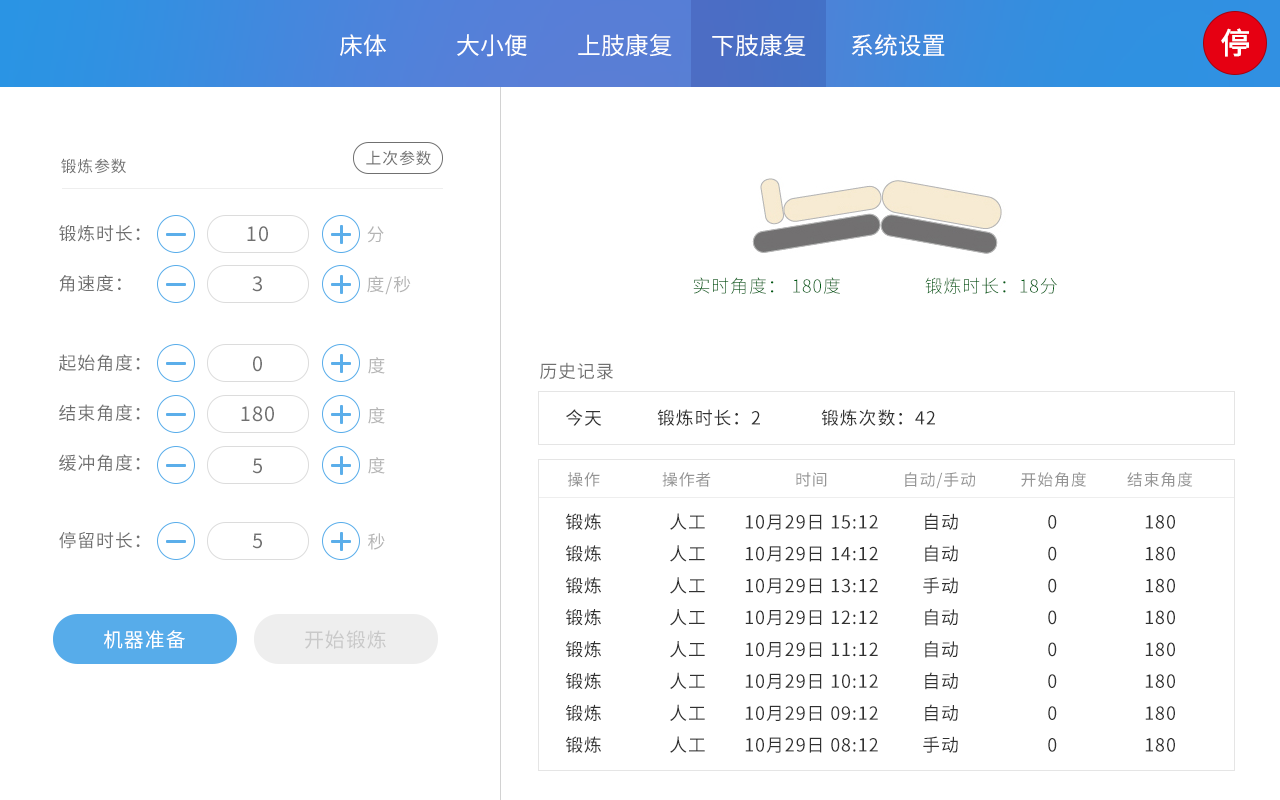
<style>
.page{position:relative;width:1280px;height:800px;background:#ffffff}
.page>*{position:absolute;margin:0}
.t1{font:29.9px "SourceHanSansCN-Medium";color:#ffffff}
.t2{font:23.9px "SourceHanSansCN-Regular";color:#ffffff}
.t3{font:15.9px "SourceHanSansCN-Regular";letter-spacing:0.05em;color:#707070}
.t4{font:17.9px/50px "SourceHanSansCN-Regular";letter-spacing:0.05em;color:#707070}
.t5{font:19.9px/50px "SourceHanSansCN-Regular";letter-spacing:0.05em;color:#707070}
.t6{font:17.9px/50px "SourceHanSansCN-Regular";letter-spacing:0.05em;color:#b5b5b5}
.t7{font:17.9px "SourceHanSansCN-Light";letter-spacing:0.05em;color:#005e15}
.t8{font:17.9px "SourceHanSansCN-Regular";letter-spacing:0.05em;color:#707070}
.t9{font:17.9px "SourceHanSansCN-Regular";letter-spacing:0.05em;color:#313131}
.t10{font:19.9px "SourceHanSansCN-Regular";letter-spacing:0.05em;color:#707070}
.t11{font:15.9px "SourceHanSansCN-Regular";letter-spacing:0.05em;color:#959595}
.t12{font:17.9px/31.9px "SourceHanSansCN-Regular";letter-spacing:0.05em;color:#313131}
.t13{font:17.9px "SourceHanSansCN-Regular";letter-spacing:0.05em;color:#b5b5b5}
.t14{font:19.9px "SourceHanSansCN-Regular";letter-spacing:0.05em;color:#ffffff}
.t15{font:19.9px "SourceHanSansCN-Regular";letter-spacing:0.05em;color:#c9c9c9}
</style>
<div class="page">
<p class="t1" style="left:1221px;top:28px;width:28px;height:29px">停</p>
<p class="t2" style="left:340px;top:34px;width:46px;height:22px">床体</p>
<p class="t2" style="left:457px;top:34px;width:70px;height:23px">大小便</p>
<p class="t2" style="left:578px;top:34px;width:94px;height:23px">上肢康复</p>
<p class="t2" style="left:712px;top:34px;width:94px;height:23px">下肢康复</p>
<p class="t2" style="left:851px;top:34px;width:94px;height:22px">系统设置</p>
<p class="t3" style="left:366px;top:150px;width:65px;height:16px">上次参数</p>
<p class="t3" style="left:61px;top:158px;width:65px;height:16px">锻炼参数</p>
<p class="t4" style="left:59px;top:225px;width:81px;height:67px">锻炼时长：<br>角速度：</p>
<p class="t5" style="left:247px;top:226px;width:21px;height:66px;text-align:center">10<br>3</p>
<p class="t6" style="left:367px;top:226px;width:44px;height:69px">分<br>度/秒</p>
<p class="t7" style="left:693px;top:277px;width:364px;height:17px">实时角度： 180度                 锻炼时长：18分</p>
<p class="t4" style="left:59px;top:354px;width:81px;height:118px">起始角度：<br>结束角度：<br>缓冲角度：</p>
<p class="t5" style="left:241px;top:356px;width:33px;height:66px;text-align:center">0<br>180</p>
<p class="t6" style="left:368px;top:357px;width:17px;height:117px">度<br>度<br>度</p>
<p class="t8" style="left:540px;top:362px;width:73px;height:18px">历史记录</p>
<p class="t9" style="left:566px;top:409px;width:369px;height:17px">今天           锻炼时长：2            锻炼次数：42</p>
<p class="t10" style="left:252px;top:458px;width:10px;height:16px">5</p>
<p class="t11" style="left:567px;top:472px;width:626px;height:17px">操作              操作者                   时间                 自动/手动          开始角度         结束角度</p>
<p class="t12" style="left:565px;top:513px;width:36px;height:240px">锻炼<br>锻炼<br>锻炼<br>锻炼<br>锻炼<br>锻炼<br>锻炼<br>锻炼</p>
<p class="t12" style="left:670px;top:513px;width:35px;height:240px">人工<br>人工<br>人工<br>人工<br>人工<br>人工<br>人工<br>人工</p>
<p class="t12" style="left:745px;top:514px;width:133px;height:239px">10月29日 15:12<br>10月29日 14:12<br>10月29日 13:12<br>10月29日 12:12<br>10月29日 11:12<br>10月29日 10:12<br>10月29日 09:12<br>10月29日 08:12</p>
<p class="t12" style="left:923px;top:513px;width:35px;height:240px">自动<br>自动<br>手动<br>自动<br>自动<br>自动<br>自动<br>手动</p>
<p class="t12" style="left:1048px;top:515px;width:9px;height:237px">0<br>0<br>0<br>0<br>0<br>0<br>0<br>0</p>
<p class="t12" style="left:1145px;top:515px;width:30px;height:237px">180<br>180<br>180<br>180<br>180<br>180<br>180<br>180</p>
<p class="t8" style="left:59px;top:531px;width:81px;height:18px">停留时长：</p>
<p class="t10" style="left:252px;top:533px;width:10px;height:16px">5</p>
<p class="t13" style="left:368px;top:533px;width:17px;height:17px">秒</p>
<p class="t14" style="left:104px;top:630px;width:81px;height:19px">机器准备</p>
<p class="t15" style="left:305px;top:630px;width:81px;height:19px">开始锻炼</p>
</div>
